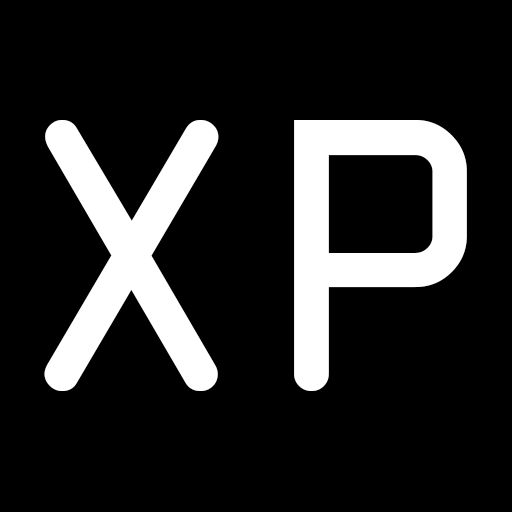
<style>
.page{position:relative;width:512px;height:512px;background:#000000}
.page>*{position:absolute;margin:0}
.t1{font:416.7px "OCRAExtended";color:#ffffff}
</style>
<div class="page">
<p class="t1" style="left:44px;top:120px;width:423px;height:271px">XP</p>
</div>
